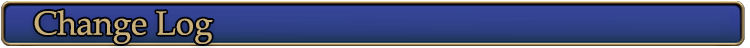
<style>
.page{position:relative;width:750px;height:48px}
.page>*{position:absolute;margin:0}
.t1{font:33.3px "BookAntiqua";color:#c9af7a}
</style>
<div class="page">
<p class="t1" style="left:34px;top:10px;width:179px;height:34px">Change Log</p>
</div>
